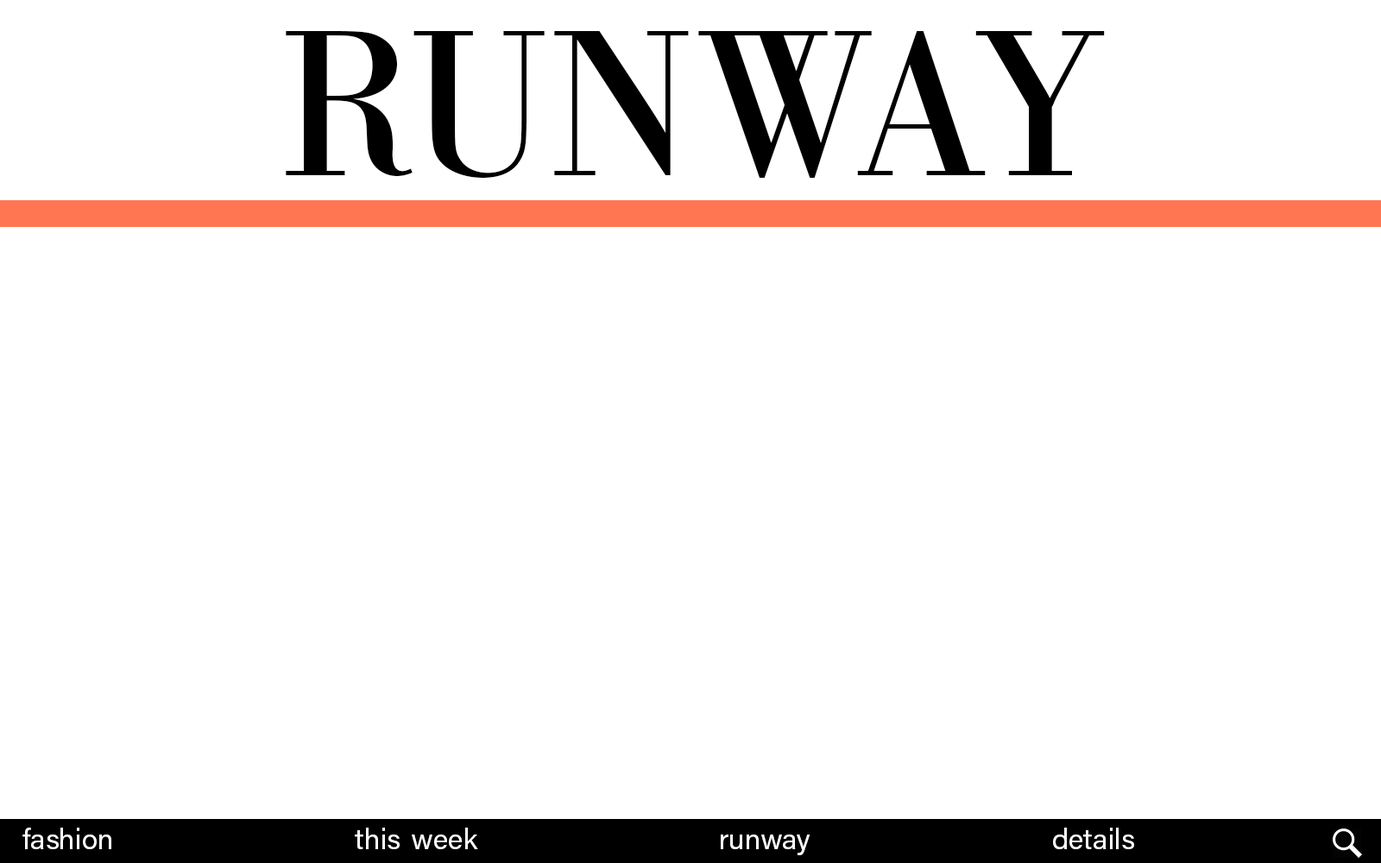
<style>
.page{position:relative;width:1381px;height:863px;background:#ffffff}
.page>*{position:absolute;margin:0}
.t1{font:215.8px "BodoniURW-Reg";color:#000000}
.t2{font:28.8px "AcuminPro-Regular";color:#ffffff}
.t3{font:28.8px "AcuminPro-Regular";color:#000000}
</style>
<div class="page">
<p class="t1" style="left:286px;top:31px;width:819px;height:147px">RUNWAY</p>
<p class="t2" style="left:22px;top:828px;width:1112px;height:28px">fashion this<span class="t3">-</span>week runway details</p>
</div>
